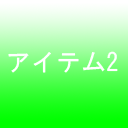
<style>
.page{position:relative;width:128px;height:128px}
.page>*{position:absolute;margin:0}
.t1{font:25px "MS-Gothic";color:#ffffff}
</style>
<div class="page">
<p class="t1" style="left:8px;top:51px;width:110px;height:22px">アイテム2</p>
</div>
